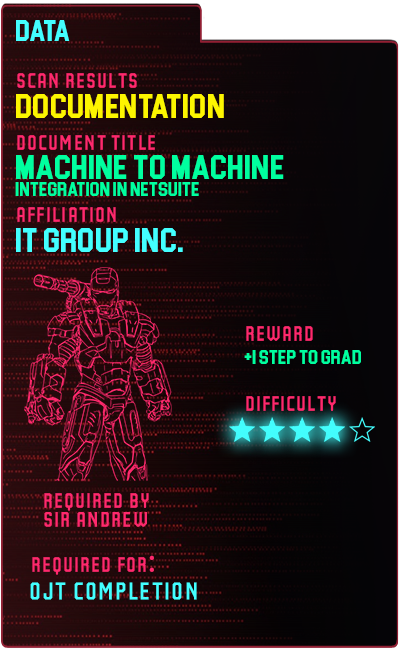
<style>
.page{position:relative;width:400px;height:650px}
.page>*{position:absolute;margin:0}
.t1{font:30px "Blockletter";color:#43ffff}
.t2{font:35px "Party-Lights-[WLM]-Flat";color:#ff296d}
.t3{font:35px "Blockletter";color:#fdf500}
.t4{font:35px "Blockletter";color:#00ff9f}
.t5{font:20px "Blockletter";color:#00ff9f}
.t6{font:35px "Blockletter";color:#43ffff}
.t7{font:36px "Party-Lights-[WLM]-Flat";color:#ff296d}
.t8{font:35px "MyriadPro-Regular";color:#ff296d}
.t9{font:42px "Party-Lights-[WLM]-Flat";color:#43ffff}
</style>
<div class="page">
<p class="t1" style="left:16px;top:20px;width:54px;height:21px">DATA</p>
<p class="t2" style="left:17px;top:73px;width:120px;height:15px">Scan REsults</p>
<p class="t3" style="left:16px;top:94px;width:208px;height:24px">Documentation</p>
<p class="t2" style="left:17px;top:135px;width:138px;height:15px">DOcument title</p>
<p class="t4" style="left:16px;top:155px;width:268px;height:24px">Machine to Machine</p>
<p class="t5" style="left:15px;top:182px;width:184px;height:14px">INtegration in Netsuite</p>
<p class="t2" style="left:17px;top:207px;width:99px;height:15px">AFFILIATION</p>
<p class="t6" style="left:16px;top:228px;width:167px;height:24px">IT Group inc.</p>
<p class="t2" style="left:246px;top:326px;width:67px;height:15px">REWARD</p>
<p class="t5" style="left:244px;top:350px;width:117px;height:14px">+1 step to Grad</p>
<p class="t2" style="left:246px;top:396px;width:90px;height:15px">Difficulty</p>
<p class="t2" style="left:44px;top:493px;width:105px;height:18px">Required by</p>
<p class="t7" style="left:44px;top:512px;width:103px;height:15px">Sir ANDREW</p>
<p class="t2" style="left:32px;top:555px;width:122px;height:20px">Required FOR<span class="t8">:</span></p>
<p class="t9" style="left:30px;top:582px;width:167px;height:18px">OJT COMPLETION</p>
</div>
